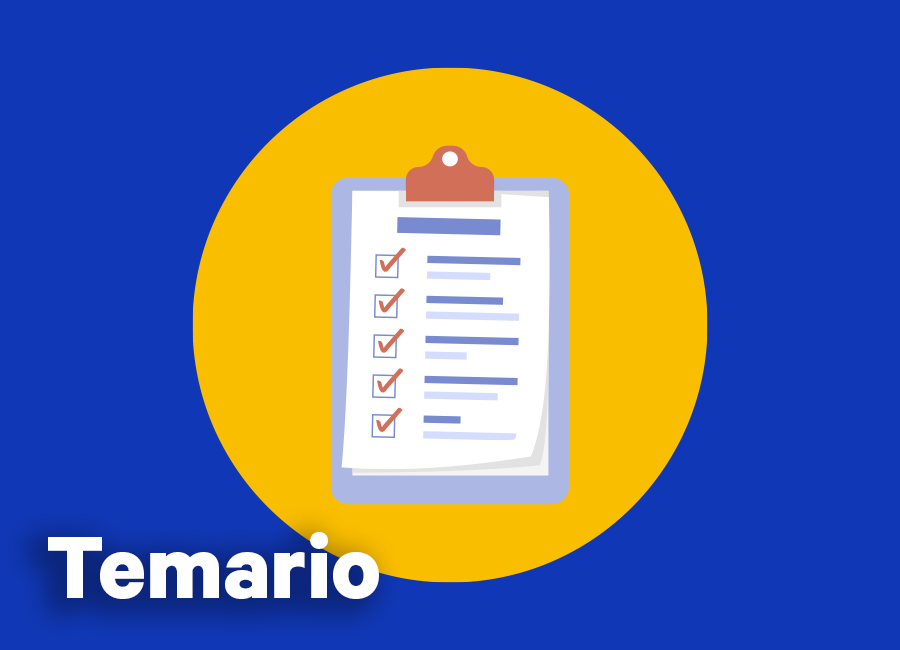
<style>
.page{position:relative;width:900px;height:650px;background:#1037b5}
.page>*{position:absolute;margin:0}
.t1{font:100px "Calibre-Bold";color:#ffffff}
</style>
<div class="page">
<p class="t1" style="left:48px;top:532px;width:331px;height:67px">Temario</p>
</div>
